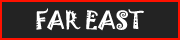
<style>
.page{position:relative;width:180px;height:40px;background:#232323}
.page>*{position:absolute;margin:0}
.t1{font:22px "Jokerman-Regular";color:#ffffff}
</style>
<div class="page">
<p class="t1" style="left:36px;top:8px;width:108px;height:23px">FAR EAST</p>
</div>
